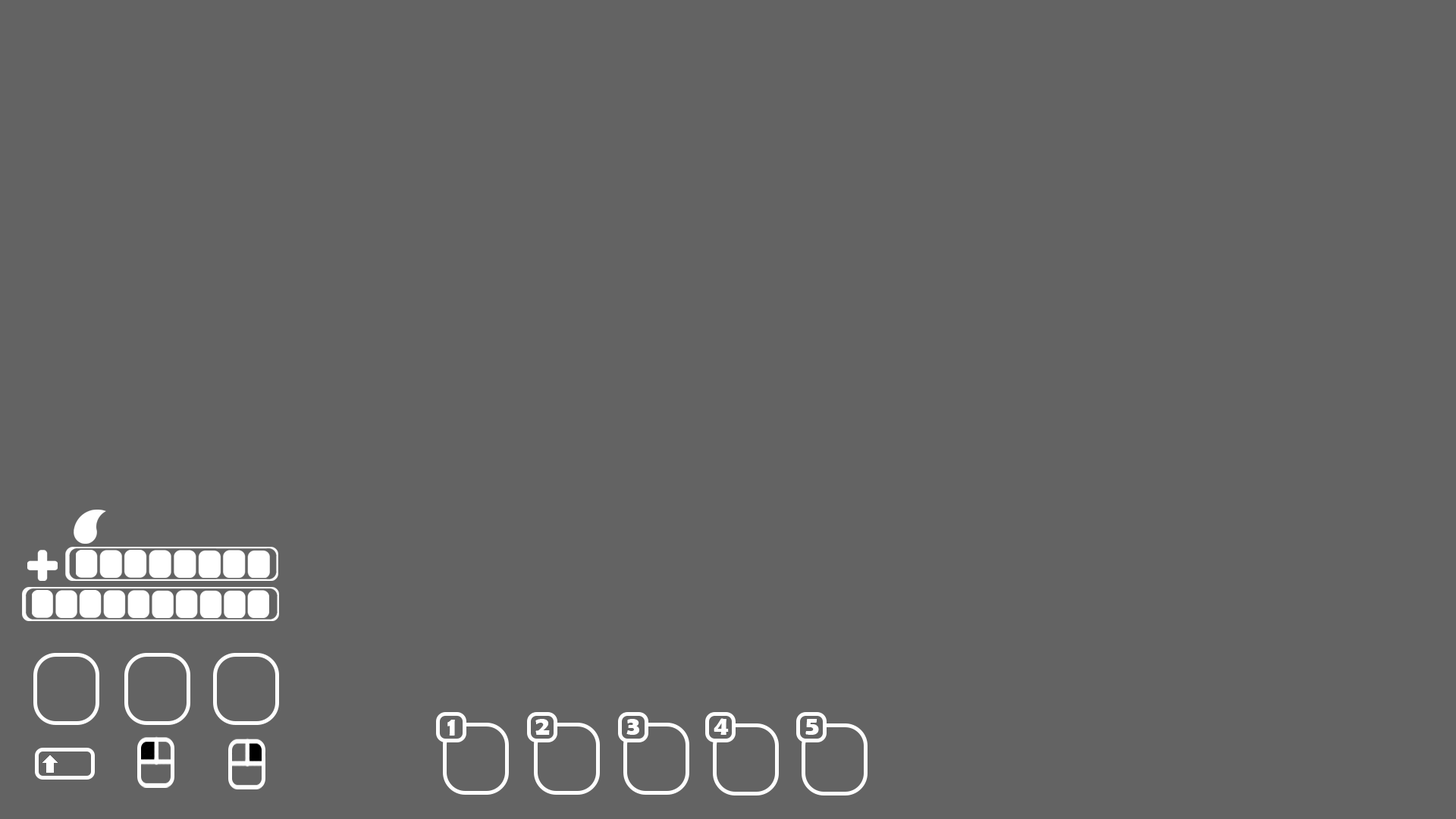
<style>
.page{position:relative;width:1456px;height:819px;background:#636363}
.page>*{position:absolute;margin:0}
.t1{font:27.4px "BerlinSansFBDemi-Bold";color:#ffffff}
.t2{font:27.1px "BerlinSansFBDemi-Bold";color:#ffffff}
</style>
<div class="page">
<p class="t1" style="left:447px;top:720px;width:8px;height:16px">1</p>
<p class="t2" style="left:535px;top:719px;width:15px;height:16px">2</p>
<p class="t2" style="left:626px;top:719px;width:13px;height:16px">3</p>
<p class="t2" style="left:714px;top:718px;width:15px;height:17px">4</p>
<p class="t2" style="left:805px;top:719px;width:14px;height:16px">5</p>
</div>
